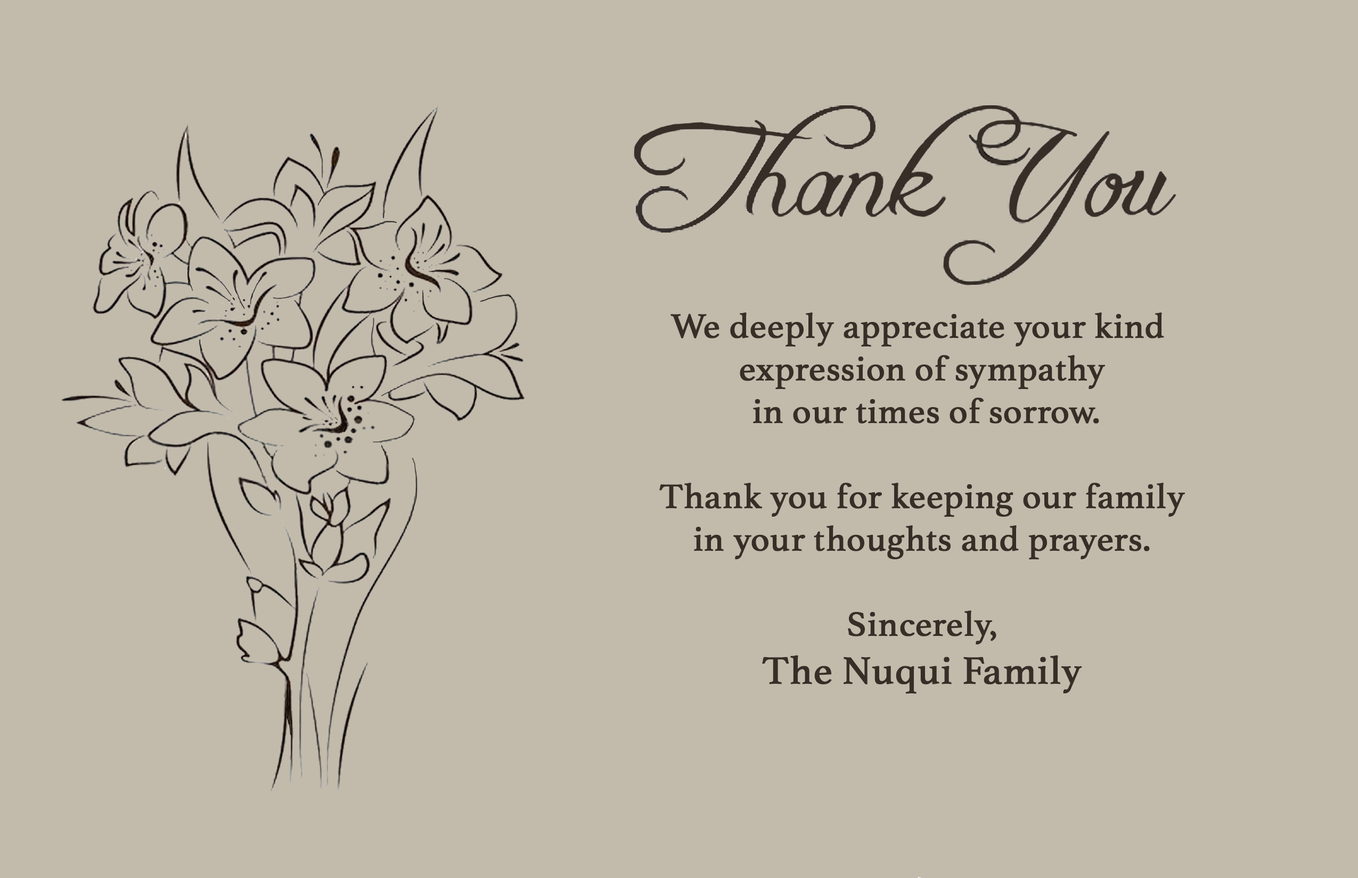
<style>
.page{position:relative;width:1358px;height:878px;background:#c2bbab}
.page>*{position:absolute;margin:0}
.t1{font:35.5px "Athelas-Regular";color:#372e27;font-weight:bold}
.t2{font:39.9px "Athelas-Regular";color:#372e27;font-weight:bold}
</style>
<div class="page">
<p class="t1" style="left:659px;top:312px;width:525px;height:382px;text-align:center">We deeply appreciate your kind <br>expression of sympathy<br> in our times of sorrow.<br><br>Thank you for keeping our family<br>in your thoughts and prayers.<br><br>Sincerely,<br><span class="t2">The Nuqui Family</span></p>
</div>
